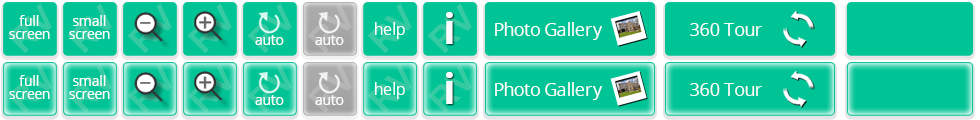
<style>
.page{position:relative;width:980px;height:120px;background:#00c496}
.page>*{position:absolute;margin:0}
.t1{font:34.5px "Arial-BoldMT";color:#36caa3}
.t2{font:34.5px "Arial-BoldMT"}
.t3{font:14px/13.1px "OpenSans";letter-spacing:-0.01em;color:#ffffff}
.t4{font:42.4px "OpenSans-Bold";color:#ffffff}
.t5{font:16px "OpenSans";letter-spacing:-0.01em;color:#ffffff}
.t6{font:17.9px "OpenSans";letter-spacing:-0.01em;color:#ffffff}
.t7{font:14px "OpenSans";color:#ffffff}
</style>
<div class="page">
<p class="t1" style="left:7px;top:3px;width:45px;height:51px;rotate:-45deg">RV</p>
<p class="t1" style="left:67px;top:3px;width:45px;height:51px;rotate:-45deg">RV</p>
<p class="t2" style="left:127px;top:3px;width:45px;height:51px;rotate:-45deg">RV</p>
<p class="t2" style="left:187px;top:3px;width:45px;height:51px;rotate:-45deg">RV</p>
<p class="t1" style="left:247px;top:3px;width:45px;height:51px;rotate:-45deg">RV</p>
<p class="t1" style="left:367px;top:3px;width:45px;height:51px;rotate:-45deg">RV</p>
<p class="t1" style="left:427px;top:3px;width:45px;height:51px;rotate:-45deg">RV</p>
<p class="t3" style="left:9px;top:15px;width:41px;height:24px;text-align:center">full<br>screen</p>
<p class="t3" style="left:69px;top:15px;width:41px;height:24px;text-align:center">small<br>screen</p>
<p class="t4" style="left:446px;top:12px;width:7px;height:32px">i</p>
<p class="t5" style="left:375px;top:22px;width:30px;height:17px">help</p>
<p class="t6" style="left:495px;top:22px;width:107px;height:18px">Photo Gallery</p>
<p class="t6" style="left:690px;top:23px;width:72px;height:13px">360 Tour</p>
<p class="t7" style="left:255px;top:35px;width:29px;height:10px">auto</p>
<p class="t7" style="left:315px;top:35px;width:29px;height:10px">auto</p>
<p class="t3" style="left:9px;top:75px;width:41px;height:24px;text-align:center">full<br>screen</p>
<p class="t3" style="left:69px;top:75px;width:41px;height:24px;text-align:center">small<br>screen</p>
<p class="t4" style="left:446px;top:72px;width:7px;height:32px">i</p>
<p class="t5" style="left:375px;top:82px;width:30px;height:17px">help</p>
<p class="t6" style="left:495px;top:82px;width:107px;height:18px">Photo Gallery</p>
<p class="t6" style="left:690px;top:83px;width:72px;height:13px">360 Tour</p>
<p class="t7" style="left:255px;top:95px;width:29px;height:10px">auto</p>
<p class="t7" style="left:315px;top:95px;width:29px;height:10px">auto</p>
</div>
